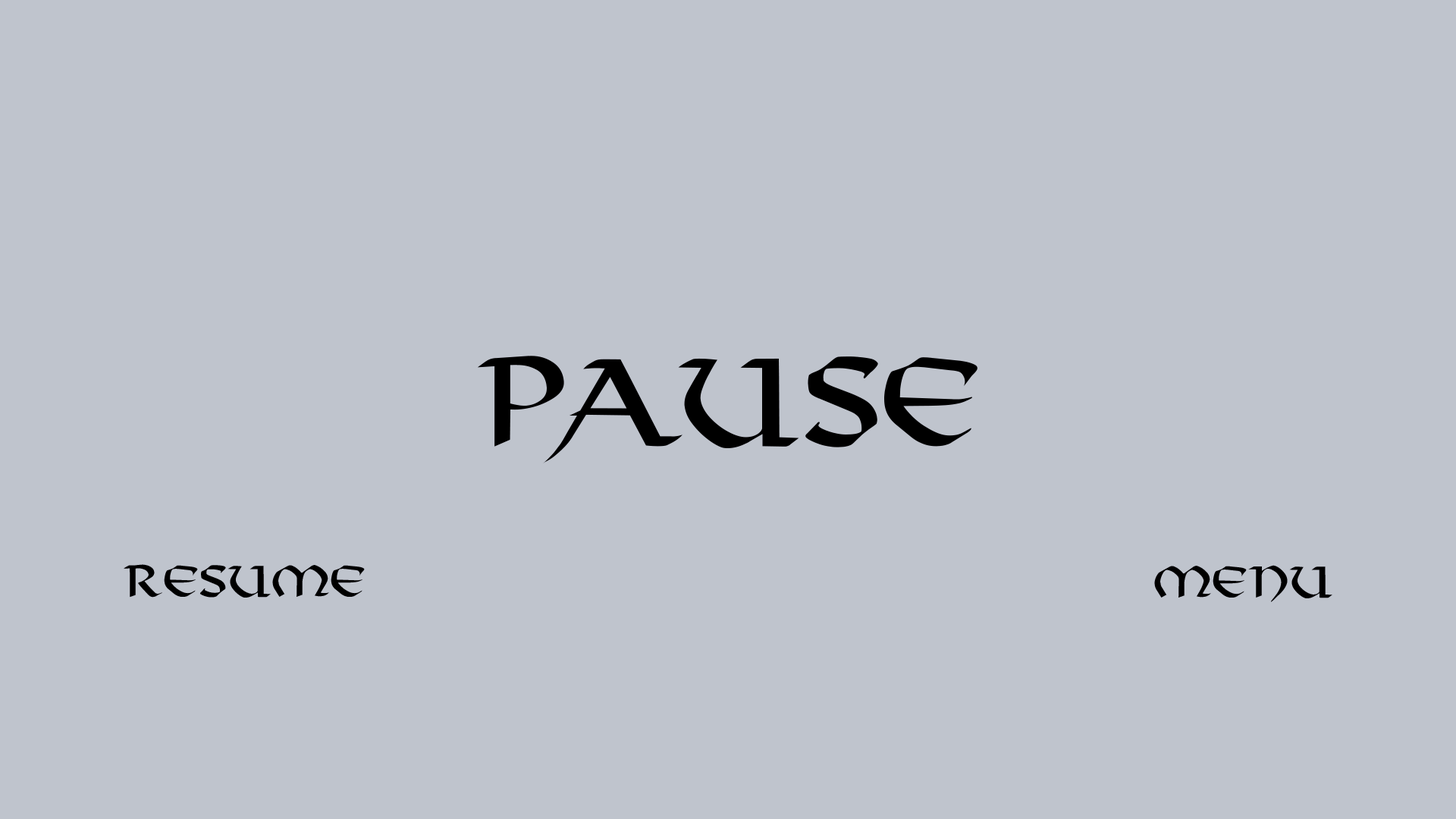
<style>
.page{position:relative;width:1456px;height:819px;background:#bfc4cd}
.page>*{position:absolute;margin:0}
.t1{font:119.5px "Viking-Normal";color:#000000}
.t2{font:42.3px "Viking-Normal";color:#000000}
</style>
<div class="page">
<p class="t1" style="left:477px;top:356px;width:500px;height:107px">pause</p>
<p class="t2" style="left:124px;top:564px;width:241px;height:34px">Resume</p>
<p class="t2" style="left:1154px;top:565px;width:178px;height:37px">Menu</p>
</div>
